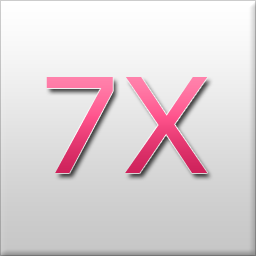
<style>
.page{position:relative;width:256px;height:256px}
.page>*{position:absolute;margin:0}
.t1{font:132.5px "Verdana"}
</style>
<div class="page">
<p class="t1" style="left:46px;top:77px;width:162px;height:96px">7X</p>
</div>
